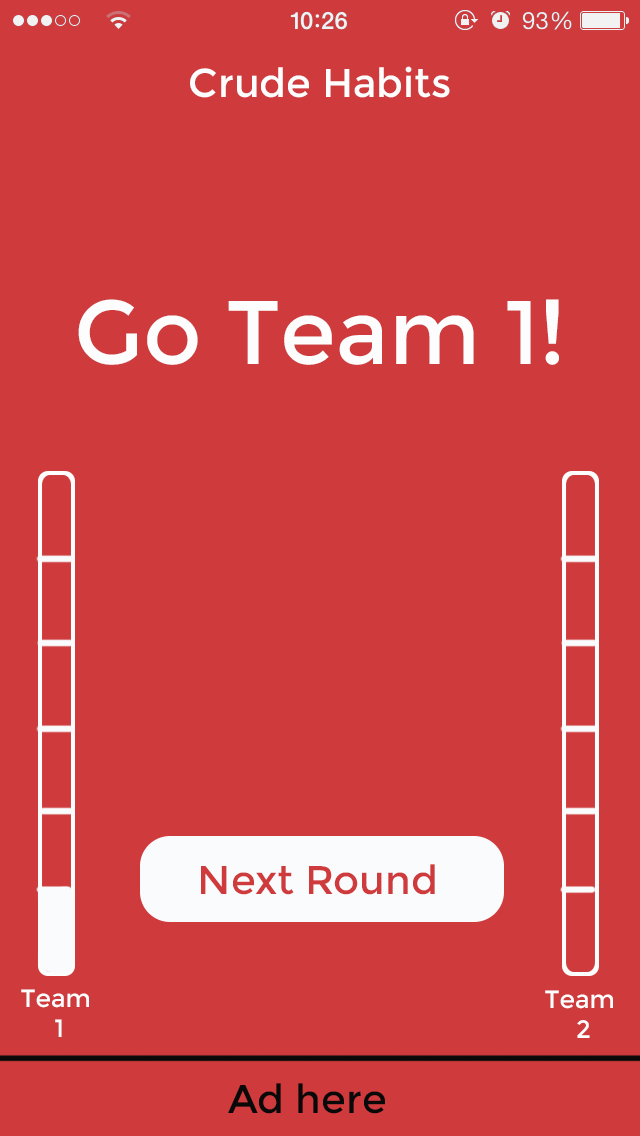
<style>
.page{position:relative;width:640px;height:1136px;background:#cf3b3d}
.page>*{position:absolute;margin:0}
.t1{font:40px "Montserrat-Regular";color:#fdfdfd}
.t2{font:90px "Montserrat-Regular";color:#fdfdfd}
.t3{font:40px "Montserrat-Regular";color:#cf3b3d}
.t4{font:25px "Montserrat-Regular";color:#fdfdfd}
.t5{font:40px "Montserrat-Regular";color:#090909}
</style>
<div class="page">
<p class="t1" style="left:190px;top:66px;width:260px;height:32px">Crude Habits</p>
<p class="t2" style="left:78px;top:299px;width:481px;height:66px">Go Team 1!</p>
<p class="t3" style="left:201px;top:864px;width:234px;height:31px">Next Round</p>
<p class="t4" style="left:21px;top:989px;width:68px;height:48px;text-align:center">Team <br>1</p>
<p class="t4" style="left:545px;top:990px;width:68px;height:48px;text-align:center">Team <br>2</p>
<p class="t5" style="left:228px;top:1083px;width:157px;height:31px">Ad here</p>
</div>
